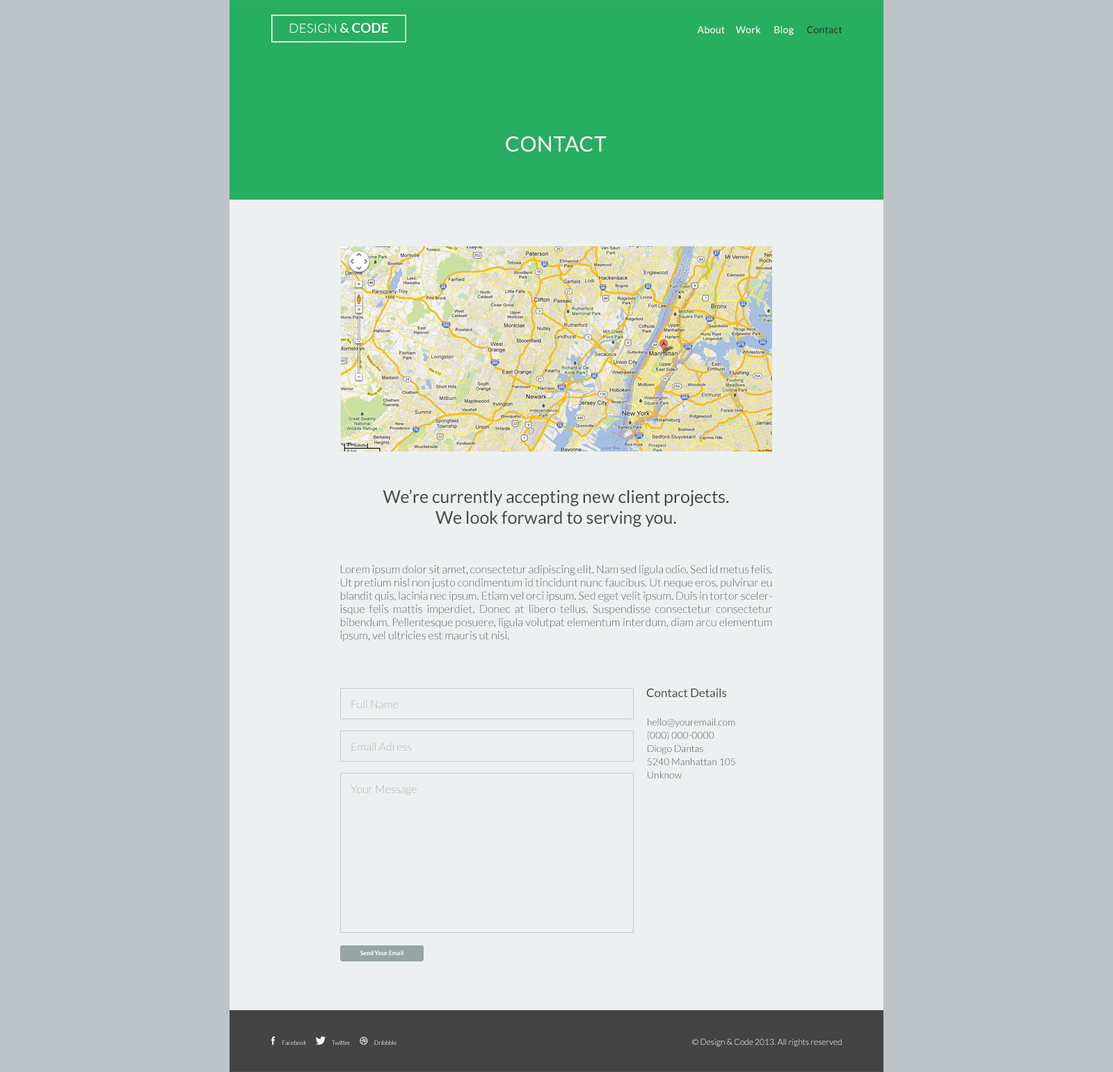
<style>
.page{position:relative;width:1113px;height:1072px;background:#bdc3c7}
.page>*{position:absolute;margin:0}
.t1{font:9.7px "Lato-Regular";letter-spacing:0.025em;color:#f9f9f9}
.t2{font:9.7px "Lato-Regular";letter-spacing:0.025em;color:#252525}
.t3{font:20.9px "Lato-Regular";letter-spacing:0.025em;color:#f9f9f9;text-transform:uppercase}
.t4{font:17.4px/20.9px "Lato-Regular";color:#444444}
.t5{font:11.1px/13.2px "Lato-Light";color:#444444}
.t6{font:11.8px "Lato-Regular";color:#444444}
.t7{font:11.1px "Lato-Light";color:#acacac}
.t8{font:9.7px/13.2px "Lato-Light"}
.t9{font:6px "Lato-Bold";color:#ffffff}
.t10{font:6px "Lato-Light"}
.t11{font:8.3px "Lato-Light"}
</style>
<div class="page">
<p class="t1" style="left:697px;top:26px;width:145px;height:9px">About     Work      Blog      <span class="t2">Contact</span></p>
<p class="t3" style="left:506px;top:136px;width:100px;height:16px">Contact</p>
<p class="t4" style="left:382px;top:490px;width:347px;height:37px;text-align:center">We’re currently accepting new client projects.<br>We look forward to serving you.</p>
<p class="t5" style="left:340px;top:565px;width:432px;height:76px;text-align:justify">Lorem ipsum dolor sit amet, consectetur adipiscing elit. Nam sed ligula odio. Sed id metus felis. Ut pretium nisl non justo condimentum id tincidunt nunc faucibus. Ut neque eros, pulvinar eu blandit quis, lacinia nec ipsum. Etiam vel orci ipsum. Sed eget velit ipsum. Duis in tortor scelerisque felis mattis imperdiet. Donec at libero tellus. Suspendisse consectetur consectetur bibendum. Pellentesque posuere, ligula volutpat elementum interdum, diam arcu elementum ipsum, vel ultricies est mauris ut nisi.</p>
<p class="t6" style="left:646px;top:688px;width:81px;height:9px">Contact Details</p>
<p class="t7" style="left:351px;top:700px;width:47px;height:9px">Full Name</p>
<p class="t8" style="left:647px;top:718px;width:88px;height:60px">hello@youremail.com<br>(000) 000-0000<br>Diogo Dantas <br>5240 Manhattan 105 <br>Unknow</p>
<p class="t7" style="left:351px;top:742px;width:61px;height:9px">Email Adress</p>
<p class="t7" style="left:350px;top:784px;width:67px;height:11px">Your Message</p>
<p class="t9" style="left:360px;top:950px;width:43px;height:5px">Send Your Email</p>
<p class="t10" style="left:282px;top:1040px;width:25px;height:5px">Facebook</p>
<p class="t10" style="left:332px;top:1040px;width:18px;height:5px">Twitter</p>
<p class="t10" style="left:374px;top:1040px;width:22px;height:5px">Dribbble</p>
<p class="t11" style="left:692px;top:1038px;width:149px;height:9px">© Design &amp; Code 2013. All rights reserved</p>
</div>
